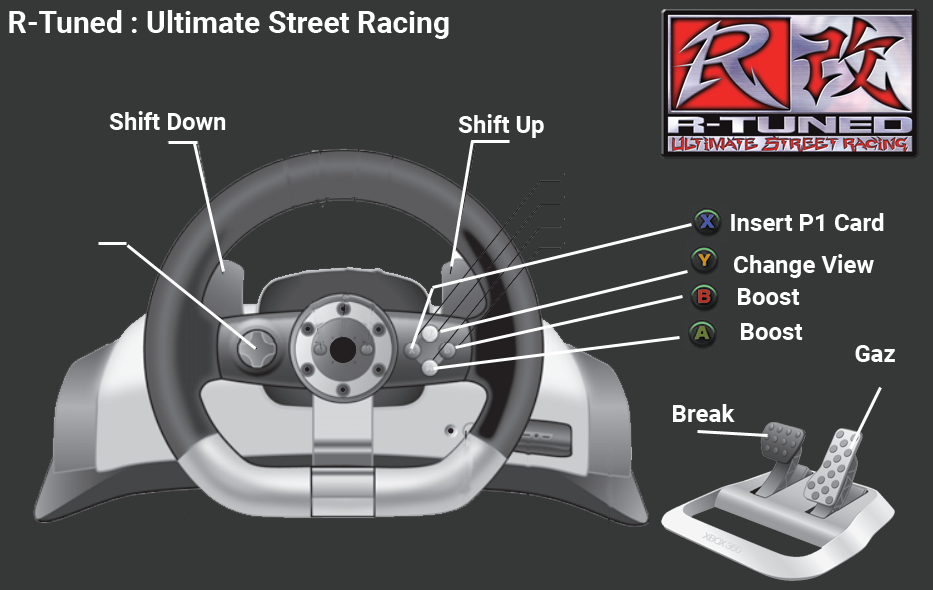
<style>
.page{position:relative;width:933px;height:590px;background:#363838}
.page>*{position:absolute;margin:0}
.t1{font:30px "Roboto-Bold";color:#ffffff}
.t2{font:24px "Roboto-Bold";color:#ffffff}
</style>
<div class="page">
<p class="t1" style="left:9px;top:10px;width:440px;height:29px">R-Tuned : Ultimate Street Racing</p>
<p class="t2" style="left:109px;top:111px;width:117px;height:19px">Shift Down</p>
<p class="t2" style="left:458px;top:114px;width:86px;height:24px">Shift Up</p>
<p class="t2" style="left:731px;top:213px;width:153px;height:18px">Insert P1 Card</p>
<p class="t2" style="left:734px;top:254px;width:140px;height:24px">Change View</p>
<p class="t2" style="left:738px;top:288px;width:62px;height:17px">Boost</p>
<p class="t2" style="left:741px;top:323px;width:62px;height:17px">Boost</p>
<p class="t2" style="left:855px;top:345px;width:40px;height:17px">Gaz</p>
<p class="t2" style="left:673px;top:404px;width:62px;height:18px">Break</p>
</div>
